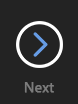
<style>
.page{position:relative;width:78px;height:104px;background:#232323}
.page>*{position:absolute;margin:0}
.t1{font:14px "SegoeUI";color:#7c7c7c;font-weight:bold}
</style>
<div class="page">
<p class="t1" style="left:24px;top:82px;width:30px;height:11px">Next</p>
</div>
